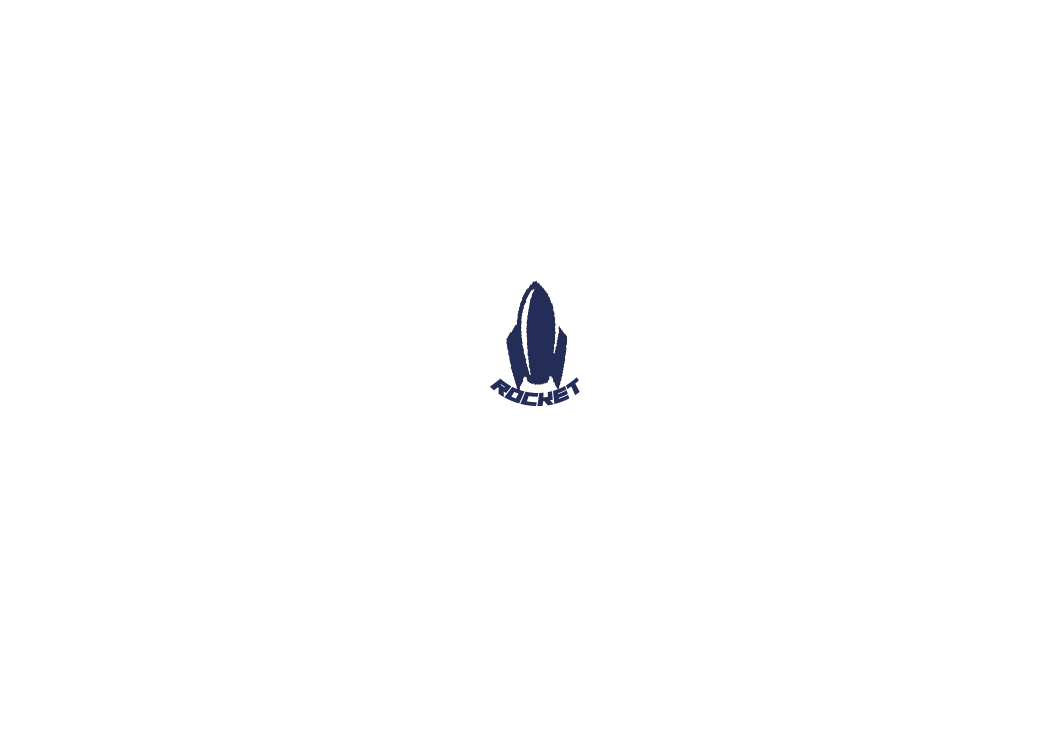
<style>
.page{position:relative;width:1050px;height:750px;background:#ffffff}
.page>*{position:absolute;margin:0}
.t1{font:19.1px "NauSea";color:#242c58}
</style>
<div class="page">
<p class="t1" style="left:489px;top:377px;width:91px;height:30px">rocket</p>
</div>
